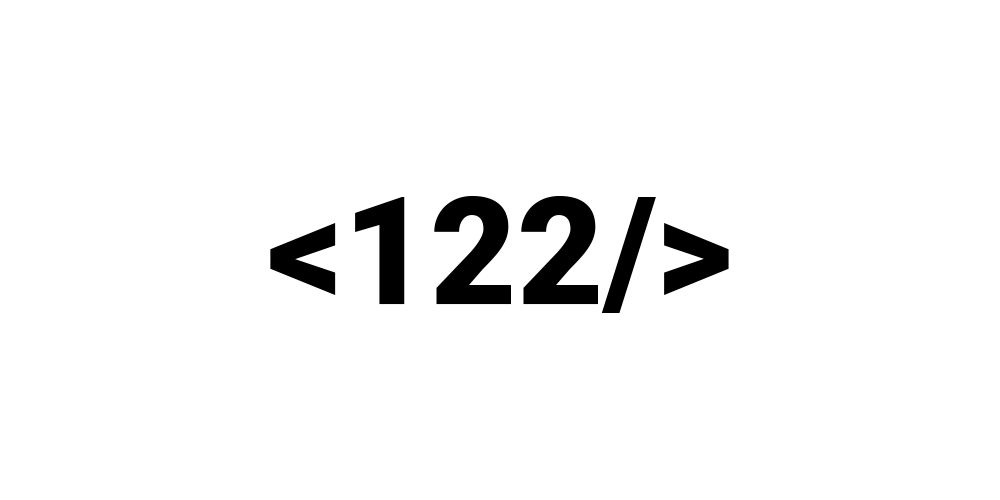
<style>
.page{position:relative;width:1000px;height:500px;background:#ffffff}
.page>*{position:absolute;margin:0}
.t1{font:150px "Roboto-Black"}
.t2{font:150px "Roboto-Black";color:#000000}
</style>
<div class="page">
<p class="t1" style="left:266px;top:191px;width:467px;height:122px">&lt;Cod/&gt;</p>
<p class="t1" style="left:266px;top:191px;width:467px;height:122px">&lt;Cod/&gt;</p>
<p class="t2" style="left:270px;top:196px;width:459px;height:117px">&lt;122/&gt;</p>
</div>
